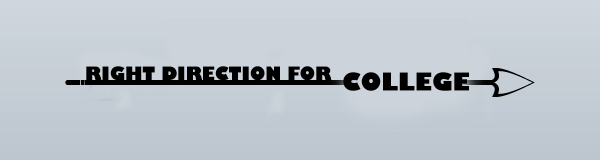
<style>
.page{position:relative;width:600px;height:160px;background:#ccd3db}
.page>*{position:absolute;margin:0}
.t1{font:18px "GillSans-UltraBold";color:#000000}
.t2{font:24px "GillSans-UltraBold";color:#000000}
</style>
<div class="page">
<p class="t1" style="left:86px;top:66px;width:246px;height:15px">RIGHT DIRECTION FOR</p>
<p class="t2" style="left:343px;top:72px;width:126px;height:19px">COLLEGE</p>
</div>
